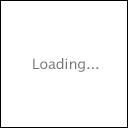
<style>
.page{position:relative;width:128px;height:128px;background:#ffffff}
.page>*{position:absolute;margin:0}
.t1{font:14px "LucidaGrande";color:#757575}
</style>
<div class="page">
<p class="t1" style="left:33px;top:58px;width:66px;height:14px">Loading...</p>
</div>
